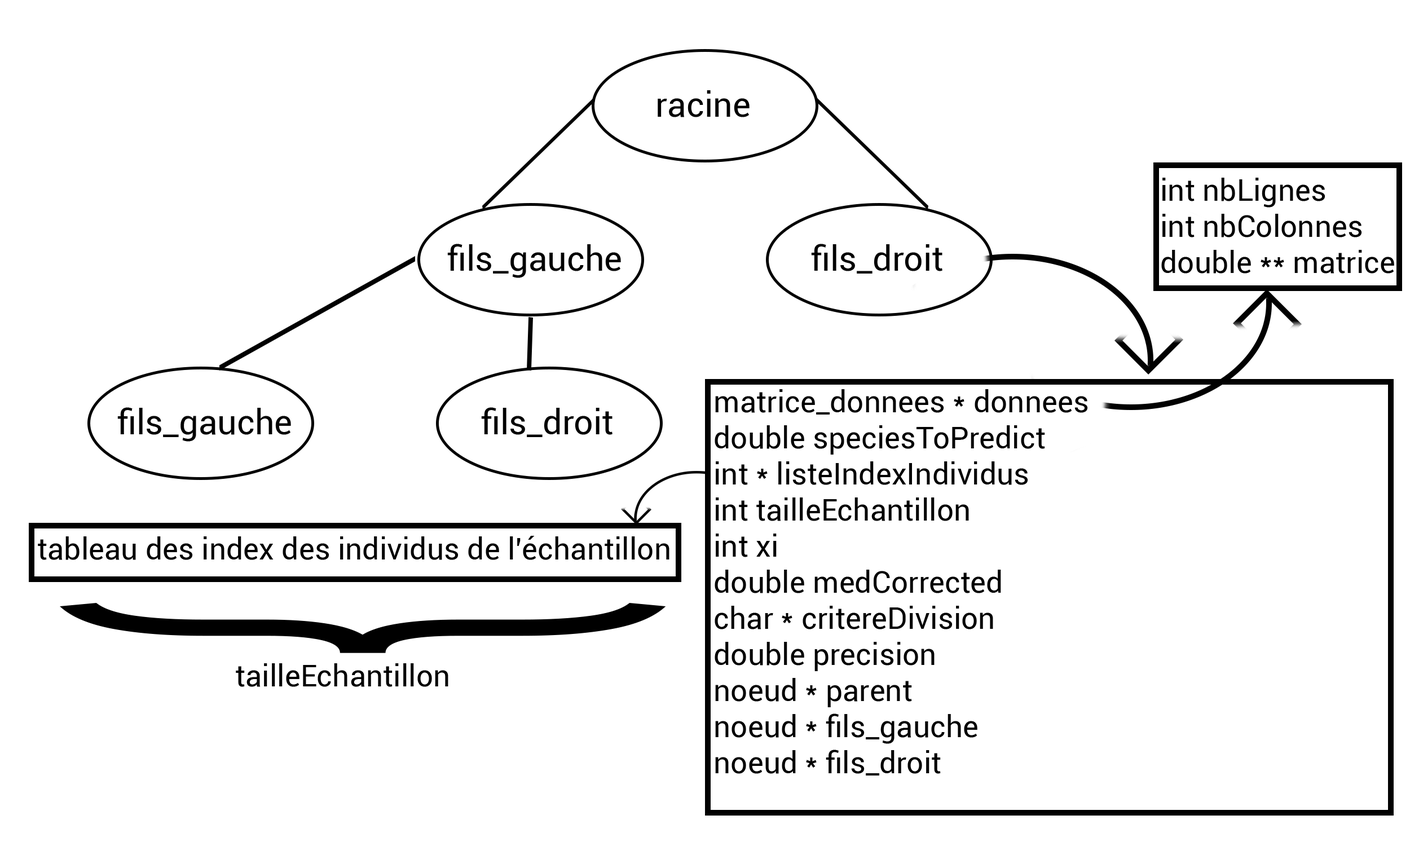
<style>
.page{position:relative;width:1410px;height:846px;background:#ffffff}
.page>*{position:absolute;margin:0}
.t1{font:34.4px "Roboto-Regular";color:#000000}
.t2{font:30.1px "Roboto-Regular";color:#000000}
.t3{font:632.5px "Roboto-Regular";color:#000000;scale:0.27 1}
</style>
<div class="page">
<p class="t1" style="left:658px;top:90px;width:91px;height:27px">racine</p>
<p class="t2" style="left:1161px;top:178px;width:233px;height:95px">int nbLignes<br>int nbColonnes<br>double ** matrice</p>
<p class="t1" style="left:447px;top:244px;width:174px;height:34px">fils_gauche</p>
<p class="t1" style="left:811px;top:244px;width:131px;height:29px">fils_droit</p>
<p class="t2" style="left:714px;top:389px;width:374px;height:386px">matrice_donnees * donnees<br>double speciesToPredict<br>int * listeIndexIndividus<br>int tailleEchantillon<br>int xi<br>double medCorrected<br>char * critereDivision<br>double precision<br>noeud * parent<br>noeud * fils_gauche<br>noeud * fils_droit</p>
<p class="t1" style="left:117px;top:407px;width:174px;height:35px">fils_gauche</p>
<p class="t1" style="left:481px;top:407px;width:131px;height:30px">fils_droit</p>
<p class="t2" style="left:38px;top:536px;width:631px;height:24px">tableau des index des individus de l’échantillon</p>
<p class="t3" style="left:60px;top:603px;width:606px;height:50px;rotate:90deg">}</p>
<p class="t2" style="left:236px;top:663px;width:212px;height:24px">tailleEchantillon</p>
</div>
